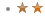
<style>
.page{position:relative;width:45px;height:16px;background:#ffffff}
.page>*{position:absolute;margin:0}
.t1{font:15px "SegoeUISymbol"}
</style>
<div class="page">
<p class="t1" style="left:17px;top:2px;width:11px;height:11px">★</p>
<p class="t1" style="left:32px;top:2px;width:11px;height:11px">★</p>
</div>
